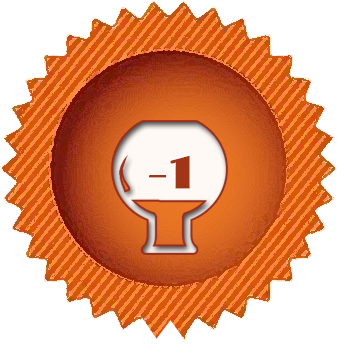
<style>
.page{position:relative;width:337px;height:344px;background:#ffffff}
.page>*{position:absolute;margin:0}
.t1{font:45.8px "Broadway";color:#a13517;font-weight:bold}
</style>
<div class="page">
<p class="t1" style="left:149px;top:156px;width:41px;height:33px">-1</p>
</div>
